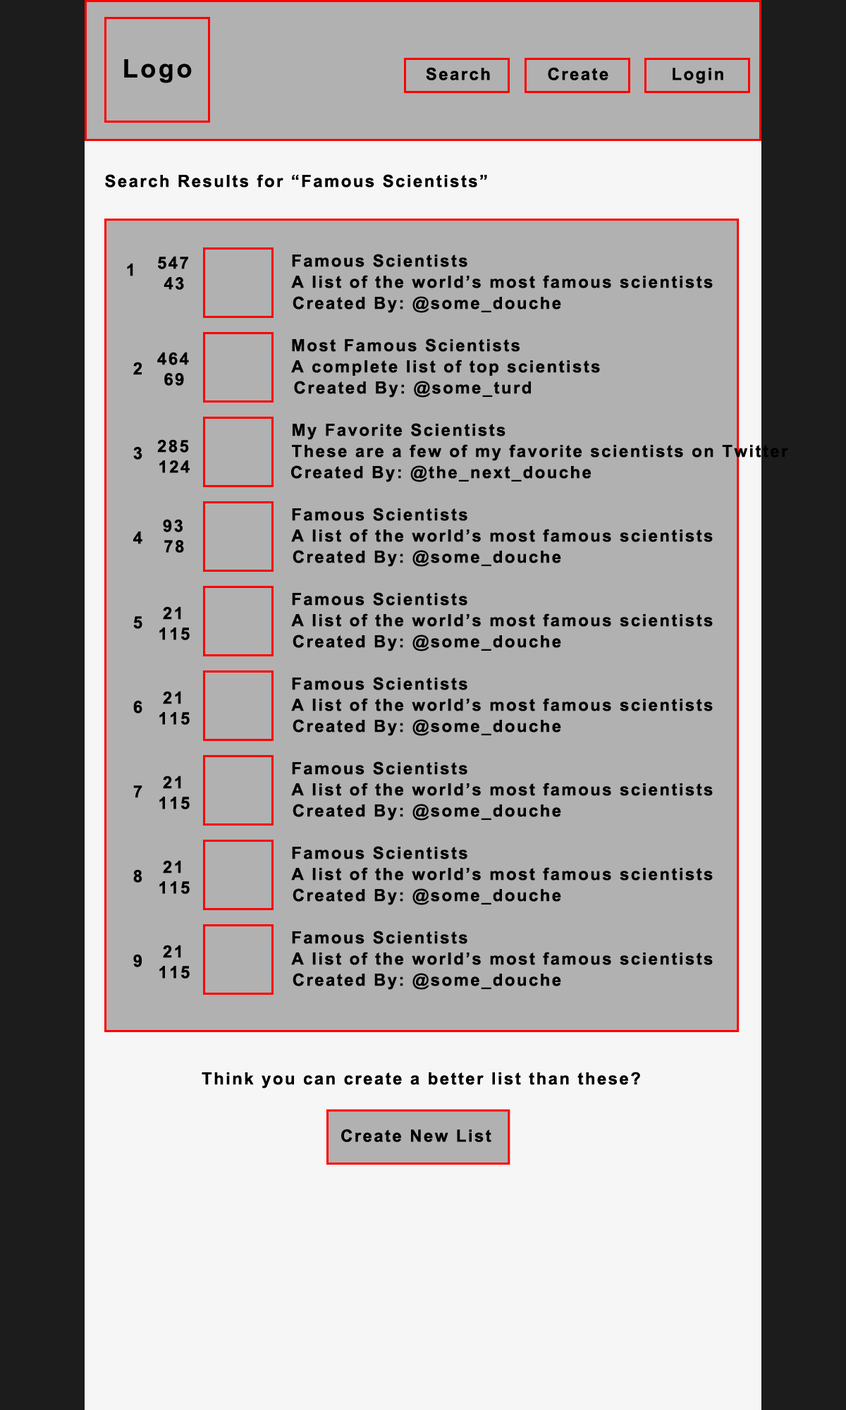
<style>
.page{position:relative;width:846px;height:1410px;background:#b1b1b1}
.page>*{position:absolute;margin:0}
.t1{font:25.4px "Arial-BoldMT";letter-spacing:0.1em;color:#000000}
.t2{font:16.9px "Arial-BoldMT";letter-spacing:0.1em;color:#000000}
</style>
<div class="page">
<p class="t1" style="left:124px;top:59px;width:68px;height:24px">Logo</p>
<p class="t2" style="left:426px;top:67px;width:64px;height:13px">Search</p>
<p class="t2" style="left:548px;top:67px;width:60px;height:13px">Create</p>
<p class="t2" style="left:672px;top:68px;width:51px;height:16px">Login</p>
<p class="t2" style="left:105px;top:174px;width:382px;height:13px">Search Results for “Famous Scientists”</p>
<p class="t2" style="left:158px;top:256px;width:30px;height:13px">547</p>
<p class="t2" style="left:292px;top:254px;width:175px;height:13px">Famous Scientists</p>
<p class="t2" style="left:127px;top:263px;width:6px;height:13px">1</p>
<p class="t2" style="left:164px;top:277px;width:20px;height:13px">43</p>
<p class="t2" style="left:291px;top:275px;width:422px;height:13px">A list of the world’s most famous scientists</p>
<p class="t2" style="left:293px;top:296px;width:268px;height:17px">Created By: @some_douche</p>
<p class="t2" style="left:292px;top:338px;width:227px;height:14px">Most Famous Scientists</p>
<p class="t2" style="left:157px;top:352px;width:32px;height:13px">464</p>
<p class="t2" style="left:133px;top:362px;width:9px;height:13px">2</p>
<p class="t2" style="left:291px;top:359px;width:309px;height:17px">A complete list of top scientists</p>
<p class="t2" style="left:164px;top:373px;width:20px;height:13px">69</p>
<p class="t2" style="left:294px;top:381px;width:237px;height:17px">Created By: @some_turd</p>
<p class="t2" style="left:293px;top:423px;width:212px;height:17px">My Favorite Scientists</p>
<p class="t2" style="left:133px;top:446px;width:9px;height:14px">3</p>
<p class="t2" style="left:157px;top:439px;width:32px;height:14px">285</p>
<p class="t2" style="left:292px;top:444px;width:496px;height:17px">These are a few of my favorite scientists on Twitter</p>
<p class="t2" style="left:159px;top:460px;width:31px;height:13px">124</p>
<p class="t2" style="left:291px;top:465px;width:300px;height:17px">Created By: @the_next_douche</p>
<p class="t2" style="left:292px;top:508px;width:175px;height:13px">Famous Scientists</p>
<p class="t2" style="left:163px;top:519px;width:20px;height:13px">93</p>
<p class="t2" style="left:133px;top:531px;width:9px;height:13px">4</p>
<p class="t2" style="left:291px;top:529px;width:422px;height:13px">A list of the world’s most famous scientists</p>
<p class="t2" style="left:164px;top:540px;width:20px;height:13px">78</p>
<p class="t2" style="left:293px;top:550px;width:268px;height:17px">Created By: @some_douche</p>
<p class="t2" style="left:292px;top:592px;width:175px;height:13px">Famous Scientists</p>
<p class="t2" style="left:133px;top:616px;width:9px;height:13px">5</p>
<p class="t2" style="left:163px;top:606px;width:18px;height:14px">21</p>
<p class="t2" style="left:291px;top:613px;width:422px;height:14px">A list of the world’s most famous scientists</p>
<p class="t2" style="left:159px;top:627px;width:31px;height:13px">115</p>
<p class="t2" style="left:293px;top:634px;width:268px;height:17px">Created By: @some_douche</p>
<p class="t2" style="left:292px;top:677px;width:175px;height:13px">Famous Scientists</p>
<p class="t2" style="left:133px;top:700px;width:9px;height:13px">6</p>
<p class="t2" style="left:163px;top:691px;width:18px;height:13px">21</p>
<p class="t2" style="left:291px;top:698px;width:422px;height:13px">A list of the world’s most famous scientists</p>
<p class="t2" style="left:159px;top:712px;width:31px;height:13px">115</p>
<p class="t2" style="left:293px;top:719px;width:268px;height:17px">Created By: @some_douche</p>
<p class="t2" style="left:292px;top:761px;width:175px;height:14px">Famous Scientists</p>
<p class="t2" style="left:133px;top:785px;width:9px;height:13px">7</p>
<p class="t2" style="left:163px;top:775px;width:18px;height:14px">21</p>
<p class="t2" style="left:291px;top:782px;width:422px;height:14px">A list of the world’s most famous scientists</p>
<p class="t2" style="left:159px;top:797px;width:31px;height:12px">115</p>
<p class="t2" style="left:293px;top:804px;width:268px;height:16px">Created By: @some_douche</p>
<p class="t2" style="left:292px;top:846px;width:175px;height:13px">Famous Scientists</p>
<p class="t2" style="left:133px;top:869px;width:9px;height:14px">8</p>
<p class="t2" style="left:163px;top:860px;width:18px;height:13px">21</p>
<p class="t2" style="left:291px;top:867px;width:422px;height:13px">A list of the world’s most famous scientists</p>
<p class="t2" style="left:159px;top:881px;width:31px;height:13px">115</p>
<p class="t2" style="left:293px;top:888px;width:268px;height:17px">Created By: @some_douche</p>
<p class="t2" style="left:292px;top:930px;width:175px;height:14px">Famous Scientists</p>
<p class="t2" style="left:133px;top:954px;width:9px;height:13px">9</p>
<p class="t2" style="left:163px;top:945px;width:18px;height:13px">21</p>
<p class="t2" style="left:291px;top:952px;width:422px;height:13px">A list of the world’s most famous scientists</p>
<p class="t2" style="left:159px;top:966px;width:31px;height:12px">115</p>
<p class="t2" style="left:293px;top:973px;width:268px;height:17px">Created By: @some_douche</p>
<p class="t2" style="left:202px;top:1071px;width:438px;height:17px">Think you can create a better list than these?</p>
<p class="t2" style="left:341px;top:1129px;width:150px;height:13px">Create New List</p>
</div>
